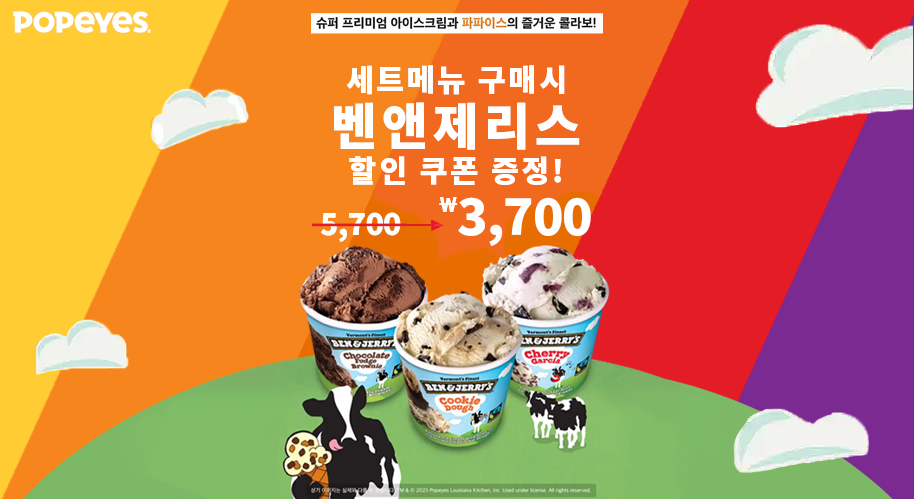
<style>
.page{position:relative;width:914px;height:499px}
.page>*{position:absolute;margin:0}
.t1{font:30px/35px "NotoSansKR-Black";letter-spacing:0.1em;color:#ffffff}
.t2{font:30px/36px "NotoSansKR-Black";letter-spacing:0.1em;color:#ffffff}
.t3{font:50px/55px "NotoSansKR-Black";letter-spacing:0.1em;color:#ffffff}
.t4{font:30px/47px "NotoSansKR-Black";letter-spacing:-0.02em;color:#ffffff}
.t5{font:50px/47px "NotoSansKR-Black";letter-spacing:-0.02em;color:#ffffff}
.t6{font:20px "NotoSansKR-Black";color:#ffffff}
</style>
<div class="page">
<p class="t1" style="left:321px;top:65px;width:270px;height:181px;text-align:center"><span class="t2">세트메뉴 구매시<br></span><span class="t3">벤앤제리스<br></span>할인 쿠폰 증정!<br><span class="t4">5,700         </span><span class="t5">3,700</span></p>
<p class="t6" style="left:439px;top:197px;width:19px;height:15px">￦</p>
</div>
